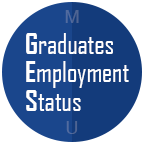
<style>
.page{position:relative;width:144px;height:144px;background:#133b7b}
.page>*{position:absolute;margin:0}
.t1{font:26px "DBHelvethaicaX-55Regular";color:#4e6492}
.t2{font:27px "AgencyFB-Reg";color:#ffffff}
.t3{font:28px "AgencyFB-Bold";color:#ffffff}
.t4{font:26px "DBHelvethaicaX-55Regular";color:#516b9f}
</style>
<div class="page">
<p class="t1" style="left:65px;top:10px;width:14px;height:13px">M</p>
<p class="t2" style="left:26px;top:33px;width:87px;height:21px"><span class="t3">G</span>raduates</p>
<p class="t2" style="left:26px;top:61px;width:103px;height:27px"><span class="t3">E</span>mployment</p>
<p class="t2" style="left:26px;top:90px;width:55px;height:21px"><span class="t3">S</span>tatus</p>
<p class="t4" style="left:66px;top:121px;width:12px;height:13px">U</p>
</div>
